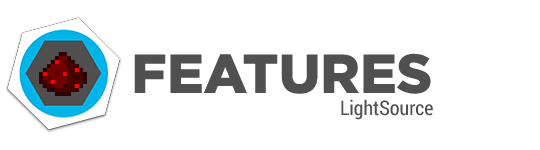
<style>
.page{position:relative;width:540px;height:150px;background:#ffffff}
.page>*{position:absolute;margin:0}
.t1{font:55px "GothamPro-Black";color:#505050}
.t2{font:20px "RobotoCondensed-Regular";color:#505050}
</style>
<div class="page">
<p class="t1" style="left:134px;top:53px;width:297px;height:41px">FEATURES</p>
<p class="t2" style="left:341px;top:99px;width:92px;height:21px">LightSource</p>
</div>
